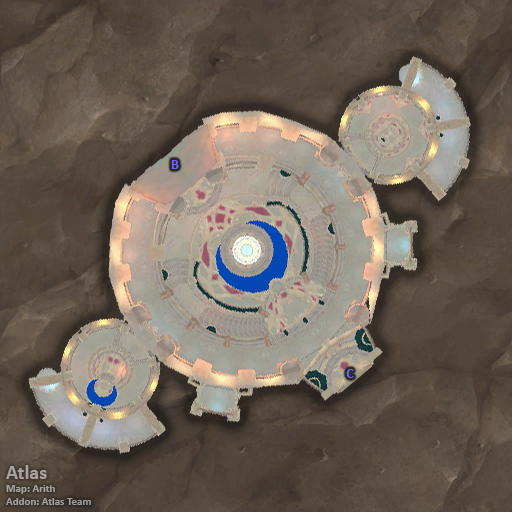
<style>
.page{position:relative;width:512px;height:512px}
.page>*{position:absolute;margin:0}
.t1{font:14px "Calibri-Bold";color:#6666ff}
.t2{font:11px "Calibri-Bold";color:#a6a19d}
.t3{font:20px "Calibri-Bold";color:#a6a19d}
</style>
<div class="page">
<p class="t1" style="left:171px;top:160px;width:8px;height:9px">B</p>
<p class="t1" style="left:346px;top:369px;width:8px;height:9px">C</p>
<p class="t2" style="left:6px;top:465px;width:85px;height:40px"><span class="t3">Atlas<br></span>Map: Arith<br>Addon: Atlas Team</p>
</div>
